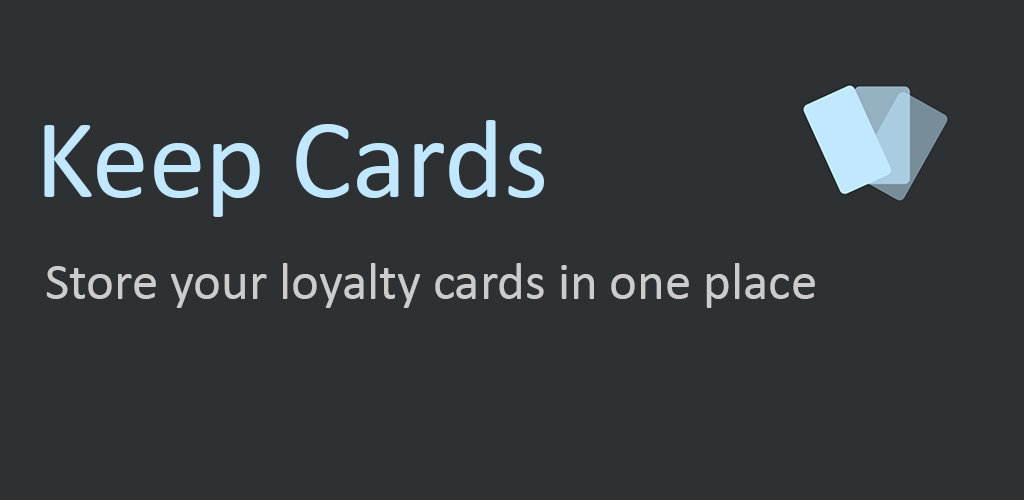
<style>
.page{position:relative;width:1024px;height:500px;background:#2e3133}
.page>*{position:absolute;margin:0}
.t1{font:113.9px "Calibri";color:#c1e8ff}
.t2{font:52.8px "Calibri";color:#cccccc}
</style>
<div class="page">
<p class="t1" style="left:44px;top:120px;width:500px;height:97px">Keep Cards</p>
<p class="t2" style="left:46px;top:263px;width:769px;height:45px">Store your loyalty cards in one place</p>
</div>
